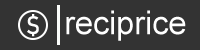
<style>
.page{position:relative;width:200px;height:50px;background:#333333}
.page>*{position:absolute;margin:0}
.t1{font:25px "Bahnschrift";color:#ffffff}
.t2{font:33px "ArialMT";color:#ffffff}
</style>
<div class="page">
<p class="t1" style="left:27px;top:14px;width:12px;height:23px">$</p>
<p class="t2" style="left:66px;top:10px;width:120px;height:31px">reciprice</p>
</div>
